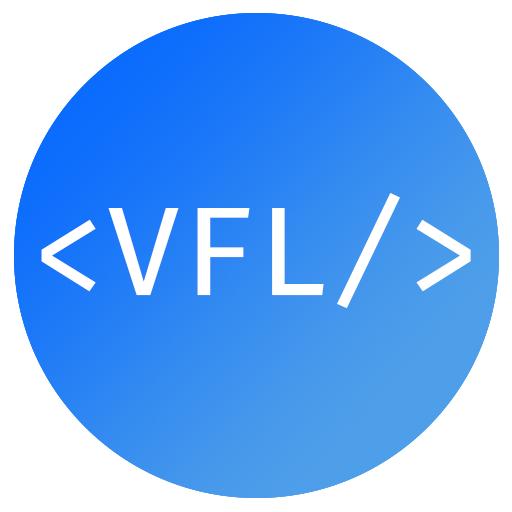
<style>
.page{position:relative;width:512px;height:512px;background:#ffffff}
.page>*{position:absolute;margin:0}
.t1{font:125px "FiraCode-Retina";color:#ffffff}
</style>
<div class="page">
<p class="t1" style="left:41px;top:193px;width:430px;height:116px">&lt;VFL/&gt;</p>
</div>
